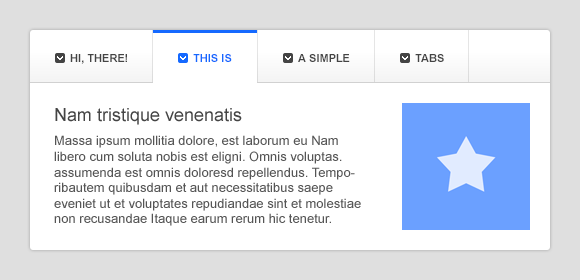
<style>
.page{position:relative;width:580px;height:280px;background:#ffffff}
.page>*{position:absolute;margin:0}
.t1{font:11px "Arial-BoldMT";color:#444444;text-transform:uppercase}
.t2{font:11px "Arial-BoldMT";color:#1569ff;text-transform:uppercase}
.t3{font:13px "ArialMT";color:#555555}
.t4{font:18px/24px "ArialMT";color:#444444}
.t5{font:13px/24px "ArialMT";color:#555555}
</style>
<div class="page">
<p class="t1" style="left:70px;top:54px;width:57px;height:10px">Hi, there!</p>
<p class="t2" style="left:193px;top:54px;width:39px;height:8px">this is</p>
<p class="t1" style="left:298px;top:54px;width:52px;height:8px">a simple</p>
<p class="t1" style="left:415px;top:54px;width:29px;height:8px">tabs</p>
<p class="t3" style="left:54px;top:108px;width:307px;height:118px"><span class="t4">Nam tristique venenatis<br></span><span class="t5">M</span>assa ipsum mollitia dolore, est laborum eu Nam libero cum soluta nobis est eligni. Omnis voluptas. assumenda est omnis doloresd repellendus. Temporibautem quibusdam et aut necessitatibus saepe eveniet ut et voluptates repudiandae sint et molestiae non recusandae Itaque earum rerum hic tenetur. Curabitur vel libero massa. Nam tristique venenatis. Phasellus scelerisque est ac enim interdum pharetra. Nam tristique venenatis tortor non interdum.</p>
</div>
